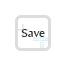
<style>
.page{position:relative;width:64px;height:64px;background:#ffffff}
.page>*{position:absolute;margin:0}
.t1{font:12px "AmiraParadiso";color:#333333}
</style>
<div class="page">
<p class="t1" style="left:21px;top:29px;width:24px;height:8px">Save</p>
</div>
